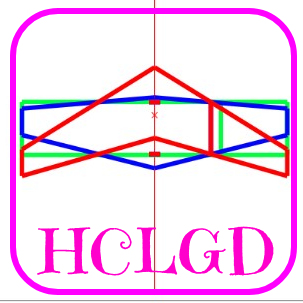
<style>
.page{position:relative;width:303px;height:303px;background:#ffffff}
.page>*{position:absolute;margin:0}
.t1{font:62px "EmilysCandy-Regular";color:#ff00cc}
</style>
<div class="page">
<p class="t1" style="left:37px;top:226px;width:237px;height:50px">HCLGD</p>
</div>
